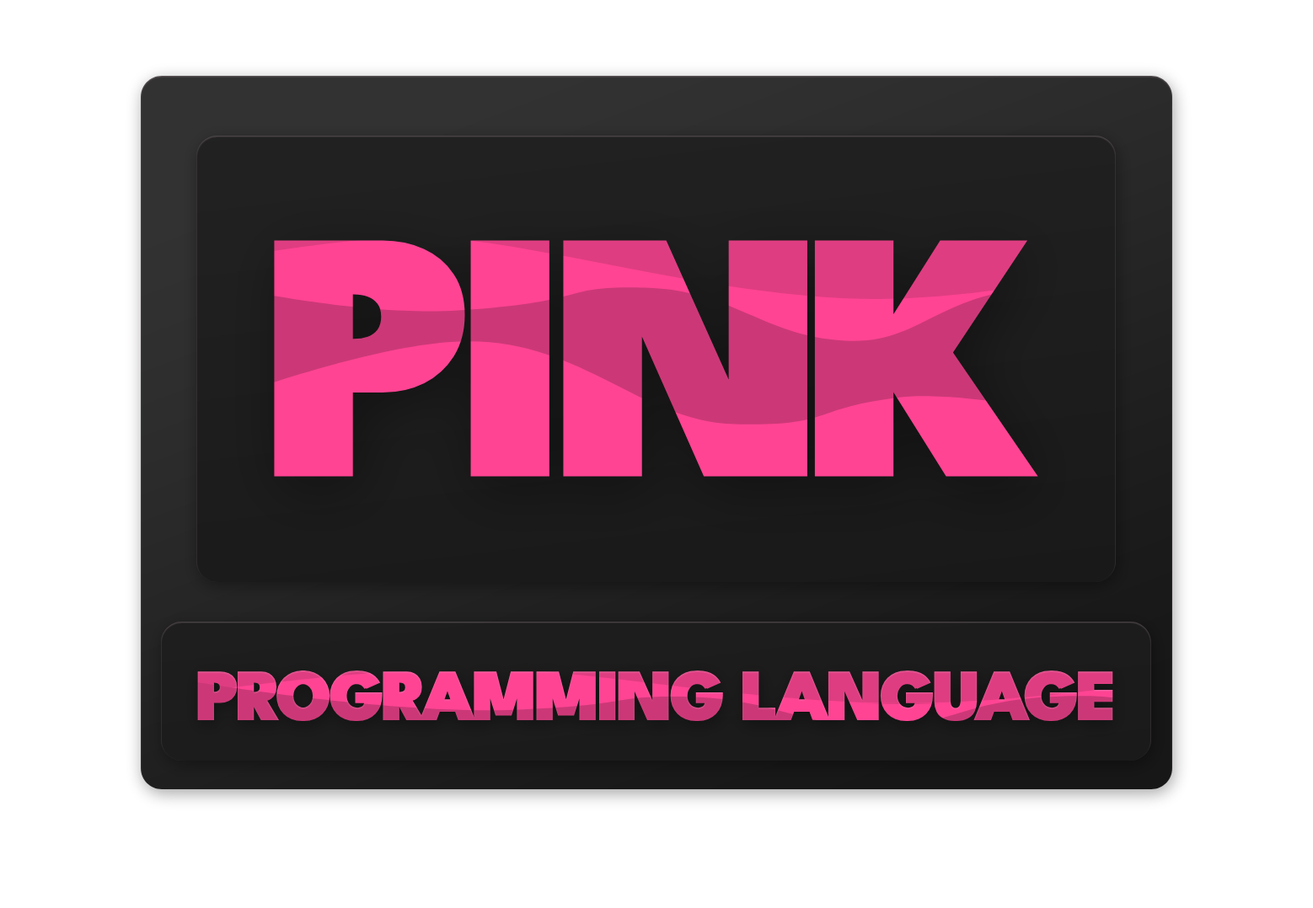
<style>
.page{position:relative;width:1313px;height:908px;background:#ffffff}
.page>*{position:absolute;margin:0}
.t1{font:357.5px "LeagueSpartan-Black";letter-spacing:-0.06em;text-transform:uppercase;font-weight:bold}
.t2{font:73.7px "LeagueSpartan-Black";letter-spacing:-0.06em;text-transform:uppercase;font-weight:bold}
</style>
<div class="page">
<p class="t1" style="left:274px;top:240px;width:764px;height:237px">Pink</p>
<p class="t2" style="left:197px;top:671px;width:916px;height:51px">Programming Language</p>
</div>
